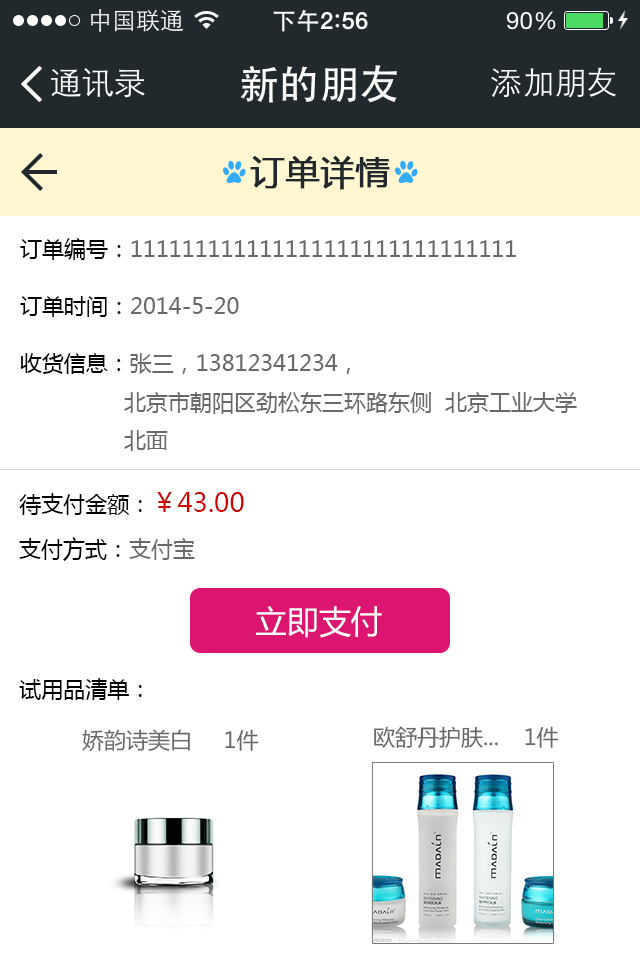
<style>
.page{position:relative;width:640px;height:960px;background:#ffffff}
.page>*{position:absolute;margin:0}
.t1{font:34px "MicrosoftYaHei";color:#22292c;font-weight:bold}
.t2{font:22px "MicrosoftYaHei";color:#696969}
.t3{font:22px "MicrosoftYaHei";color:#000000}
.t4{font:26px "MicrosoftYaHei";color:#ce0000}
.t5{font:32.4px "MicrosoftYaHei";color:#ffffff}
</style>
<div class="page">
<p class="t1" style="left:250px;top:156px;width:140px;height:34px">订单详情</p>
<p class="t2" style="left:20px;top:238px;width:496px;height:22px"><span class="t3">订单编号：</span>111111111111111111111111111111</p>
<p class="t2" style="left:20px;top:296px;width:219px;height:21px"><span class="t3">订单时间：</span>2014-5-20</p>
<p class="t2" style="left:20px;top:353px;width:557px;height:98px"><span class="t3">收货信息：</span>张三，13812341234，<br>                北京市朝阳区劲松东三环路东侧  北京工业大学<br>                北面</p>
<p class="t3" style="left:19px;top:492px;width:225px;height:23px">待支付金额：<span class="t4">￥43.00</span></p>
<p class="t3" style="left:19px;top:537px;width:176px;height:24px">支付方式：<span class="t2">支付宝</span></p>
<p class="t5" style="left:256px;top:606px;width:126px;height:32px">立即支付</p>
<p class="t3" style="left:19px;top:678px;width:123px;height:22px">试用品清单：</p>
<p class="t2" style="left:374px;top:726px;width:124px;height:23px">欧舒丹护肤...</p>
<p class="t2" style="left:525px;top:726px;width:34px;height:22px">1件</p>
<p class="t2" style="left:82px;top:729px;width:108px;height:22px">娇韵诗美白</p>
<p class="t2" style="left:225px;top:729px;width:34px;height:22px">1件</p>
</div>
